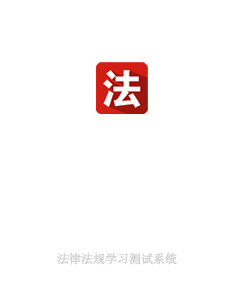
<style>
.page{position:relative;width:240px;height:282px;background:#ffffff}
.page>*{position:absolute;margin:0}
.t1{font:12px "SimSun";color:#d1d1d1;font-weight:bold}
</style>
<div class="page">
<p class="t1" style="left:57px;top:252px;width:120px;height:13px">法律法规学习测试系统</p>
</div>
